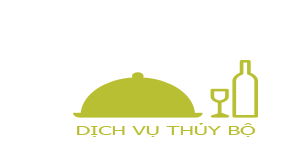
<style>
.page{position:relative;width:307px;height:152px;background:#ffffff}
.page>*{position:absolute;margin:0}
.t1{font:12.7px "Tahoma";color:#b9bf33;scale:1.7 1}
</style>
<div class="page">
<p class="t1" style="left:77px;top:123px;width:178px;height:14px">DỊCH VỤ THỦY BỘ</p>
</div>
